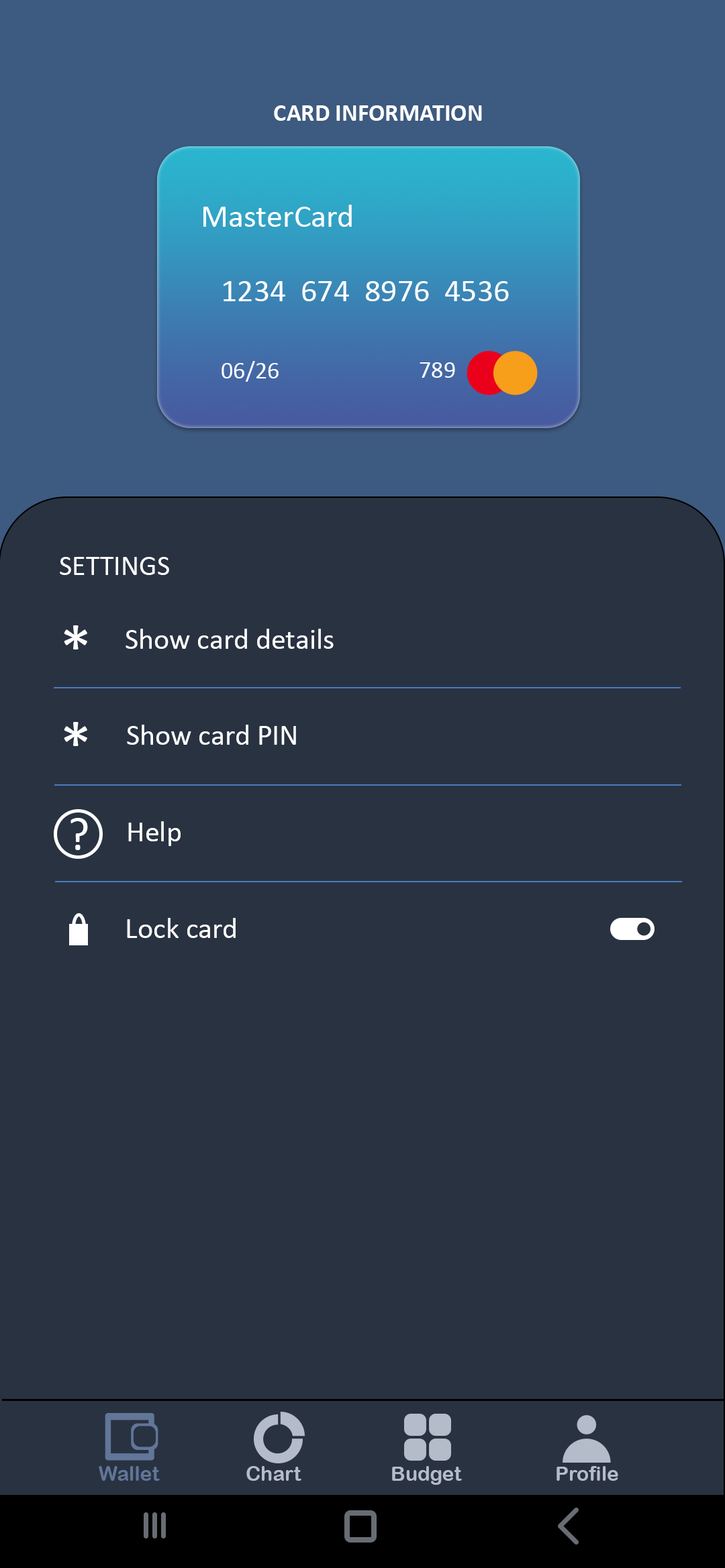
<style>
.page{position:relative;width:725px;height:1568px;background:#293241}
.page>*{position:absolute;margin:0}
.t1{font:24.2px "Calibri-Bold";color:#ffffff}
.t2{font:32.2px "Calibri";color:#ffffff}
.t3{font:24.2px "Calibri";color:#ffffff}
.t4{font:28.2px "Calibri";color:#ffffff}
.t5{font:67.1px "Calibri";color:#ffffff}
.t6{font:29.5px "Calibri";color:#ffffff}
.t7{font:46.8px "Calibri";color:#ffffff}
.t8{font:20.1px "ArialRoundedMTBold";color:#617698}
.t9{font:20.1px "ArialRoundedMTBold";color:#b4bcc9}
</style>
<div class="page">
<p class="t1" style="left:274px;top:105px;width:208px;height:16px">CARD INFORMATION</p>
<p class="t2" style="left:203px;top:205px;width:149px;height:22px">MasterCard</p>
<p class="t2" style="left:223px;top:281px;width:286px;height:20px">1234  674  8976  4536</p>
<p class="t3" style="left:221px;top:361px;width:57px;height:21px">06/26</p>
<p class="t3" style="left:419px;top:362px;width:36px;height:16px">789</p>
<p class="t4" style="left:60px;top:557px;width:109px;height:18px">SETTINGS</p>
<p class="t5" style="left:64px;top:625px;width:23px;height:24px">*</p>
<p class="t6" style="left:125px;top:629px;width:208px;height:20px">Show card details</p>
<p class="t5" style="left:64px;top:722px;width:23px;height:24px">*</p>
<p class="t6" style="left:127px;top:725px;width:169px;height:20px">Show card PIN</p>
<p class="t7" style="left:70px;top:818px;width:18px;height:32px">?</p>
<p class="t6" style="left:128px;top:821px;width:52px;height:25px">Help</p>
<p class="t6" style="left:127px;top:918px;width:109px;height:20px">Lock card</p>
<p class="t8" style="left:99px;top:1466px;width:61px;height:15px">Wallet</p>
<p class="t9" style="left:246px;top:1466px;width:55px;height:15px">Chart</p>
<p class="t9" style="left:392px;top:1466px;width:70px;height:19px">Budget</p>
<p class="t9" style="left:556px;top:1466px;width:62px;height:15px">Profile</p>
</div>
